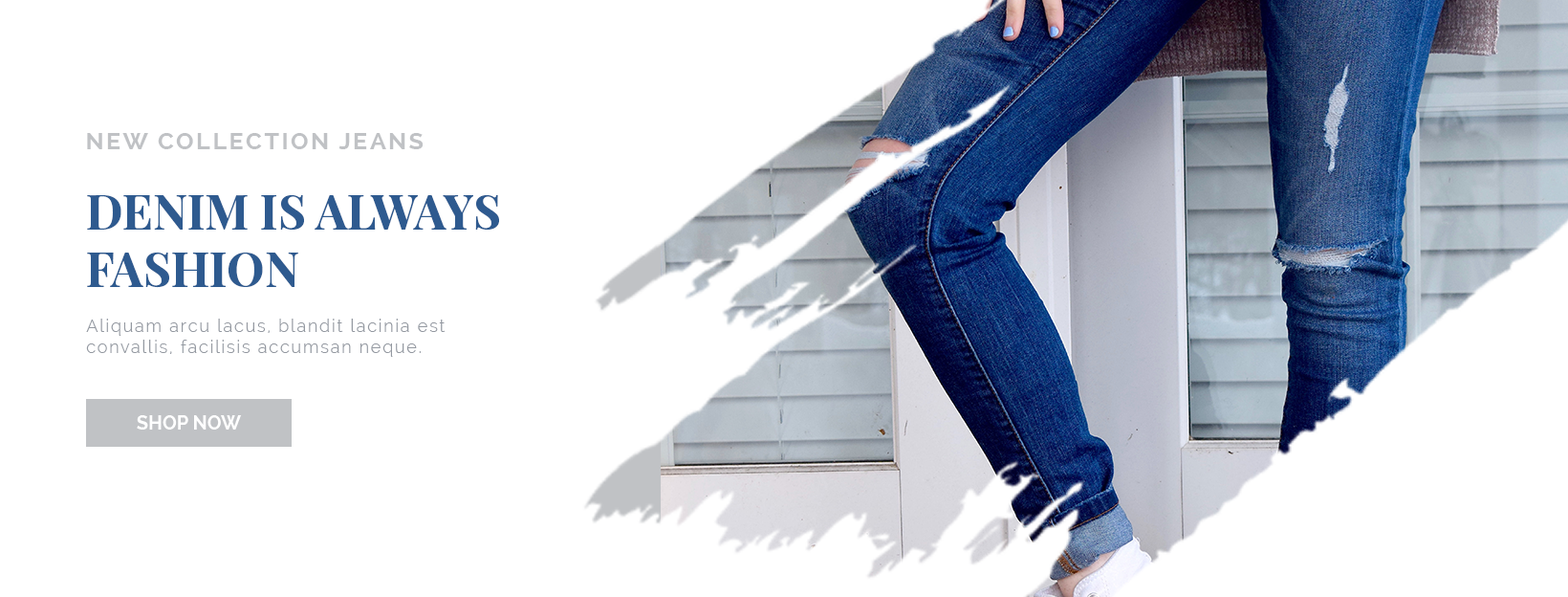
<style>
.page{position:relative;width:1568px;height:597px;background:#ffffff}
.page>*{position:absolute;margin:0}
.t1{font:23.9px "Raleway-Bold";letter-spacing:0.1em;color:#c0c2c5}
.t2{font:47.8px "PlayfairDisplaySC-Bold";color:#2e5a8f}
.t3{font:17.2px "Raleway-Light";letter-spacing:0.1em;color:#9499a1}
.t4{font:19.1px "Raleway-Bold";color:#ffffff}
</style>
<div class="page">
<p class="t1" style="left:87px;top:133px;width:337px;height:16px">NEW COLLECTION JEANS</p>
<p class="t2" style="left:87px;top:194px;width:412px;height:94px">DENIM IS ALWAYS <br>FASHION</p>
<p class="t3" style="left:86px;top:318px;width:360px;height:39px">Aliquam arcu lacus, blandit lacinia est <br>convallis, facilisis accumsan neque.</p>
<p class="t4" style="left:137px;top:415px;width:105px;height:14px">SHOP NOW</p>
</div>
